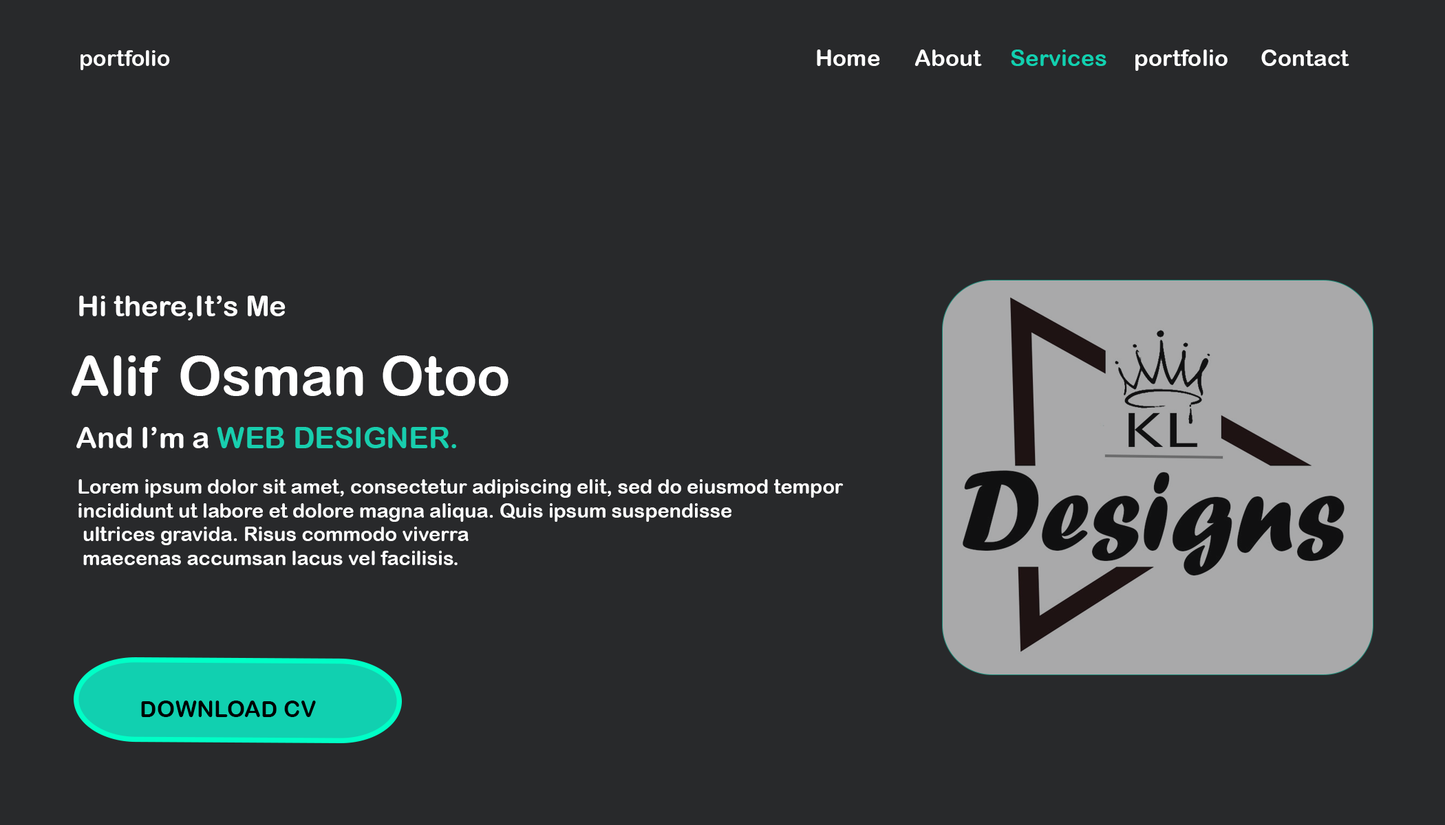
<style>
.page{position:relative;width:1445px;height:825px;background:#28292b}
.page>*{position:absolute;margin:0}
.t1{font:22.2px "ArialRoundedMTBold";color:#ffffff}
.t2{font:22.9px "ArialRoundedMTBold";color:#ffffff}
.t3{font:22.9px "ArialRoundedMTBold";color:#11d0b0}
.t4{font:28.7px "ArialRoundedMTBold";color:#ffffff}
.t5{font:55.2px "ArialRoundedMTBold";color:#ffffff}
.t6{font:29.4px "ArialRoundedMTBold";color:#18ceae}
.t7{font:29.4px "ArialRoundedMTBold";color:#ffffff}
.t8{font:19.9px "ArialRoundedMTBold";color:#ffffff}
.t9{font:22.9px "ArialRoundedMTBold";color:#000000}
</style>
<div class="page">
<p class="t1" style="left:80px;top:50px;width:90px;height:20px">portfolio</p>
<p class="t2" style="left:817px;top:50px;width:63px;height:16px">Home</p>
<p class="t2" style="left:914px;top:50px;width:68px;height:16px">About</p>
<p class="t3" style="left:1011px;top:50px;width:95px;height:16px">Services</p>
<p class="t2" style="left:1135px;top:50px;width:92px;height:21px">portfolio</p>
<p class="t2" style="left:1261px;top:50px;width:88px;height:16px">Contact</p>
<p class="t4" style="left:79px;top:296px;width:206px;height:25px">Hi there,It’s Me</p>
<p class="t5" style="left:72px;top:356px;width:436px;height:40px">Alif Osman Otoo</p>
<p class="t6" style="left:76px;top:427px;width:380px;height:22px"><span class="t7">And I’m a </span>WEB DESIGNER.</p>
<p class="t8" style="left:78px;top:479px;width:765px;height:86px">Lorem ipsum dolor sit amet, consectetur adipiscing elit, sed do eiusmod tempor <br>incididunt ut labore et dolore magna aliqua. Quis ipsum suspendisse<br> ultrices gravida. Risus commodo viverra<br> maecenas accumsan lacus vel facilisis.</p>
<p class="t9" style="left:141px;top:701px;width:175px;height:16px">DOWNLOAD CV</p>
</div>
